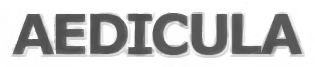
<style>
.page{position:relative;width:315px;height:67px;background:#ffffff}
.page>*{position:absolute;margin:0}
.t1{font:54.6px "Verdana-Bold";letter-spacing:-0.06em;color:#585858;font-variant:small-caps}
</style>
<div class="page">
<p class="t1" style="left:12px;top:13px;width:290px;height:42px">AEDICULA</p>
<p class="t1" style="left:12px;top:13px;width:290px;height:42px">AEDICULA</p>
</div>
